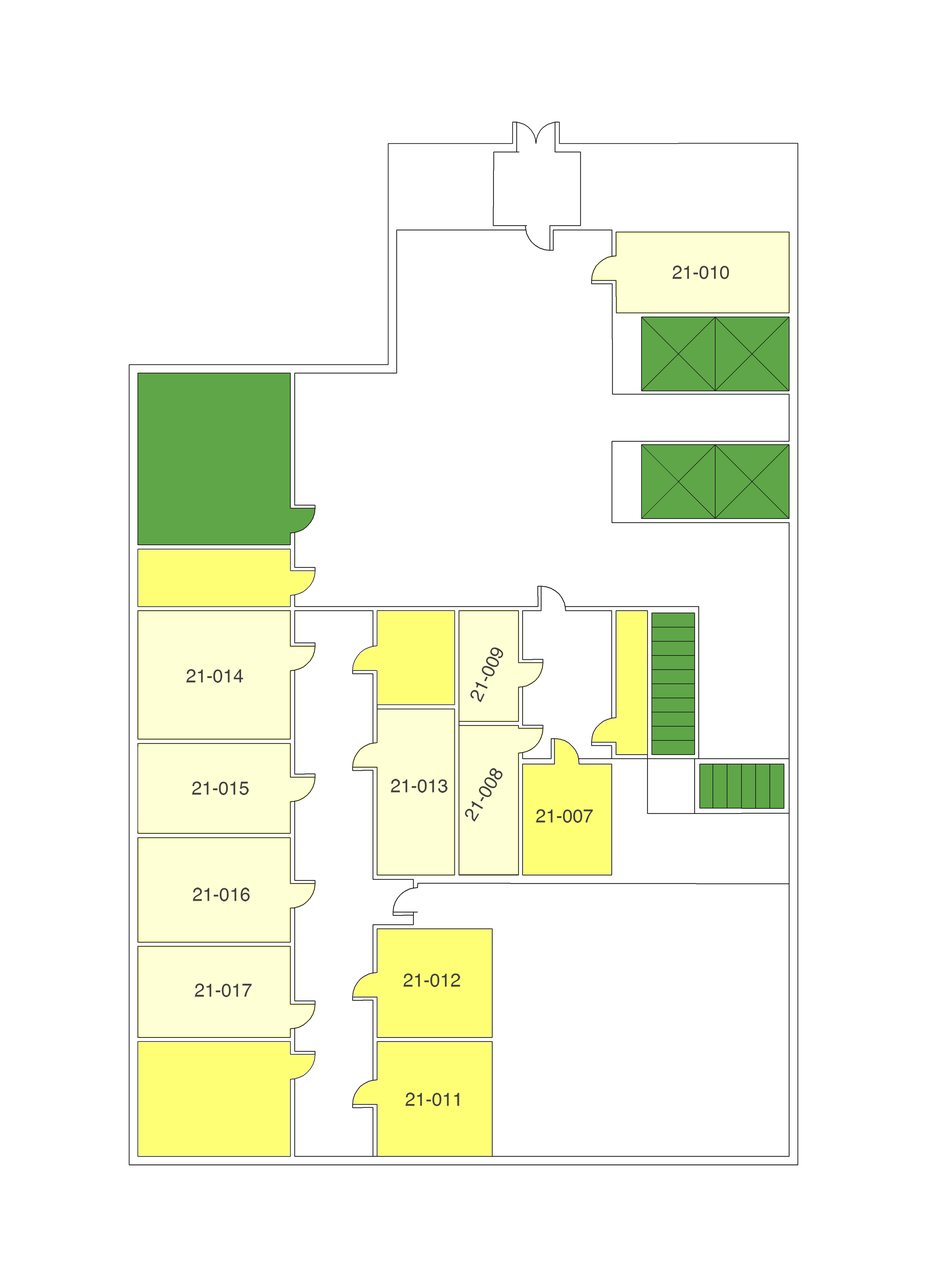
<style>
.page{position:relative;width:927px;height:1287px;background:#ffffff}
.page>*{position:absolute;margin:0}
.t1{font:18.5px "Helvetica";color:#3f3f3f}
</style>
<div class="page">
<p class="t1" style="left:672px;top:265px;width:57px;height:14px">21-010</p>
<p class="t1" style="left:470px;top:647px;width:33px;height:55px;rotate:-65deg">21-009</p>
<p class="t1" style="left:186px;top:669px;width:57px;height:14px">21-014</p>
<p class="t1" style="left:465px;top:768px;width:37px;height:54px;rotate:-59deg">21-008</p>
<p class="t1" style="left:192px;top:781px;width:57px;height:14px">21-015</p>
<p class="t1" style="left:391px;top:779px;width:56px;height:14px">21-013</p>
<p class="t1" style="left:536px;top:809px;width:57px;height:14px">21-007</p>
<p class="t1" style="left:193px;top:887px;width:57px;height:14px">21-016</p>
<p class="t1" style="left:403px;top:973px;width:57px;height:14px">21-012</p>
<p class="t1" style="left:195px;top:983px;width:57px;height:14px">21-017</p>
<p class="t1" style="left:405px;top:1092px;width:54px;height:14px">21-011</p>
</div>
